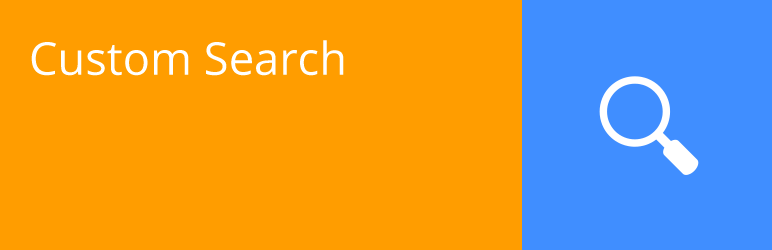
<style>
.page{position:relative;width:772px;height:250px;background:#ff9d00}
.page>*{position:absolute;margin:0}
.t1{font:45.2px "OpenSans";color:#ffffff}
</style>
<div class="page">
<p class="t1" style="left:31px;top:40px;width:313px;height:36px">Custom Search</p>
</div>
